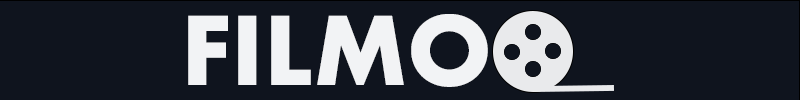
<style>
.page{position:relative;width:800px;height:100px;background:#0f141e}
.page>*{position:absolute;margin:0}
.t1{font:91.7px "Futura-Bold";color:#f2f3f5}
</style>
<div class="page">
<p class="t1" style="left:188px;top:14px;width:300px;height:73px">FILMO</p>
</div>
